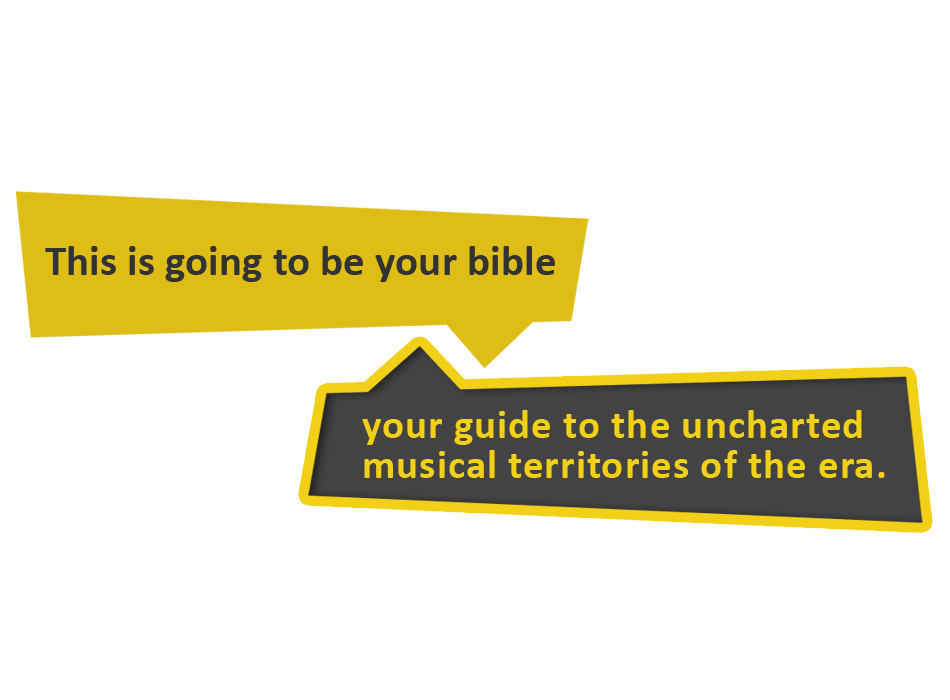
<style>
.page{position:relative;width:950px;height:700px;background:#ffffff}
.page>*{position:absolute;margin:0}
.t1{font:43.3px "Calibri-Bold";color:#333333}
.t2{font:41.5px/39.8px "Calibri-Bold";letter-spacing:0.02em;color:#f3d018}
</style>
<div class="page">
<p class="t1" style="left:45px;top:246px;width:510px;height:36px">This is going to be your bible</p>
<p class="t2" style="left:362px;top:410px;width:523px;height:68px">your guide to the uncharted <br>musical territories of the era.</p>
</div>
